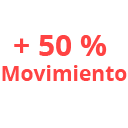
<style>
.page{position:relative;width:128px;height:128px;background:#ffffff}
.page>*{position:absolute;margin:0}
.t1{font:21px "OpenSans-Bold";color:#ff4343}
.t2{font:30px "OpenSans-Bold";color:#ff4343}
</style>
<div class="page">
<p class="t1" style="left:2px;top:35px;width:125px;height:46px;text-align:center"><span class="t2">+ 50 % <br></span>Movimiento</p>
</div>
